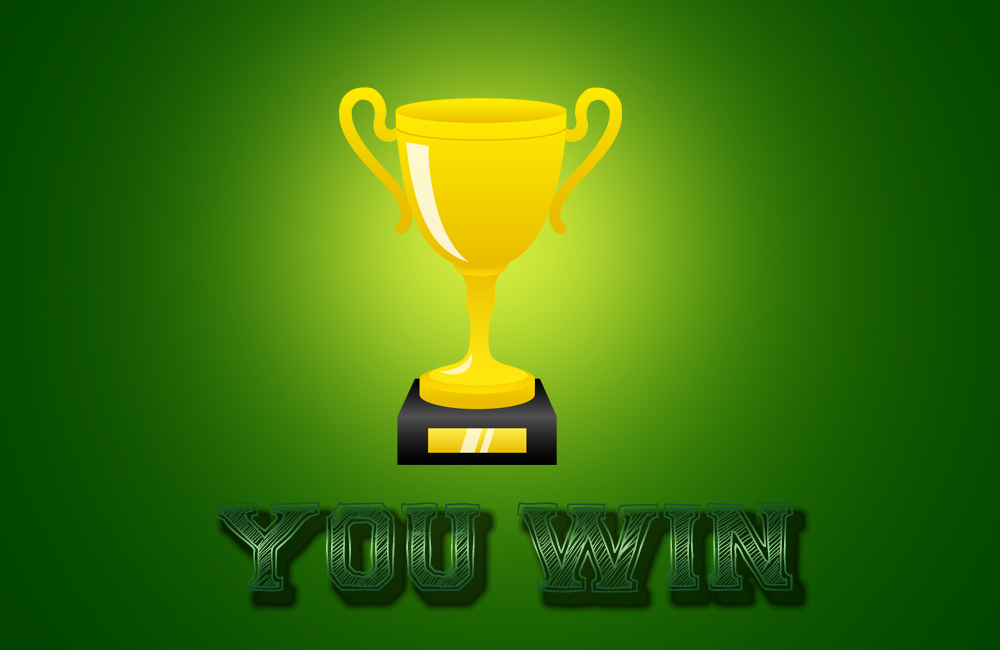
<style>
.page{position:relative;width:1000px;height:650px}
.page>*{position:absolute;margin:0}
.t1{font:125px "FineCollege";letter-spacing:0.01em}
</style>
<div class="page">
<p class="t1" style="left:215px;top:501px;width:579px;height:92px">YOU WIN</p>
</div>
